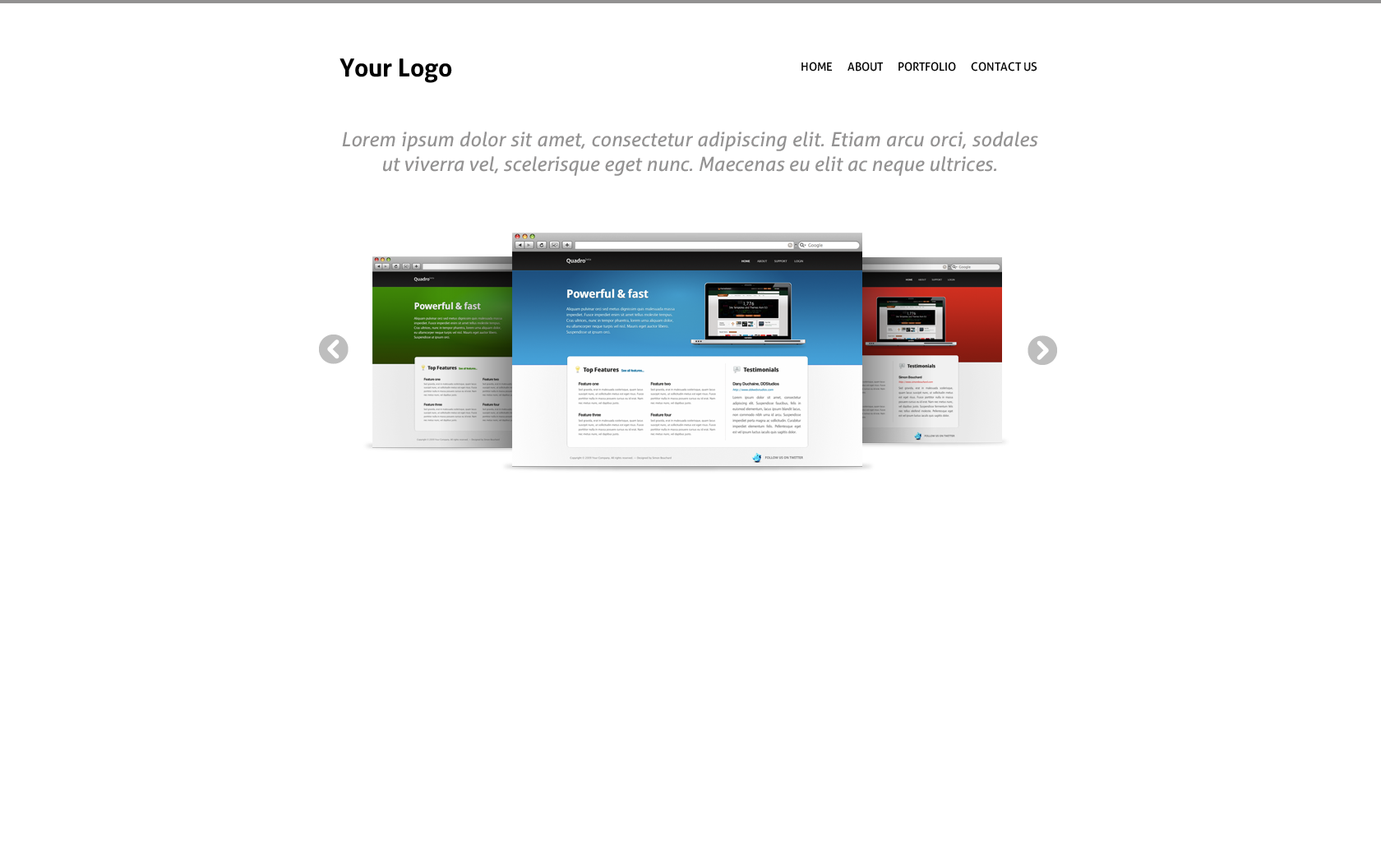
<style>
.page{position:relative;width:1381px;height:863px;background:#ffffff}
.page>*{position:absolute;margin:0}
.t1{font:24.7px "Aller-Bold";color:#000000}
.t2{font:11.5px "Aller";color:#000000}
.t3{font:19.7px/24.7px "Aller-Italic";color:#939292}
</style>
<div class="page">
<p class="t1" style="left:340px;top:58px;width:112px;height:25px">Your Logo</p>
<p class="t2" style="left:802px;top:62px;width:236px;height:10px">HOME      ABOUT      PORTFOLIO      CONTACT US</p>
<p class="t3" style="left:342px;top:132px;width:696px;height:44px;text-align:justify">Lorem ipsum dolor sit amet, consectetur adipiscing elit. Etiam arcu orci, sodales ut viverra vel, scelerisque eget nunc. Maecenas eu elit ac neque ultrices.</p>
</div>
